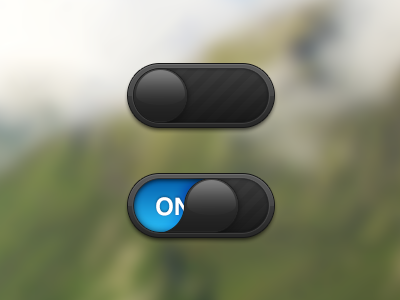
<style>
.page{position:relative;width:400px;height:300px}
.page>*{position:absolute;margin:0}
.t1{font:24px "Helvetica-Bold";letter-spacing:-0.01em;color:#ffffff}
</style>
<div class="page">
<p class="t1" style="left:156px;top:197px;width:34px;height:19px">ON</p>
</div>
